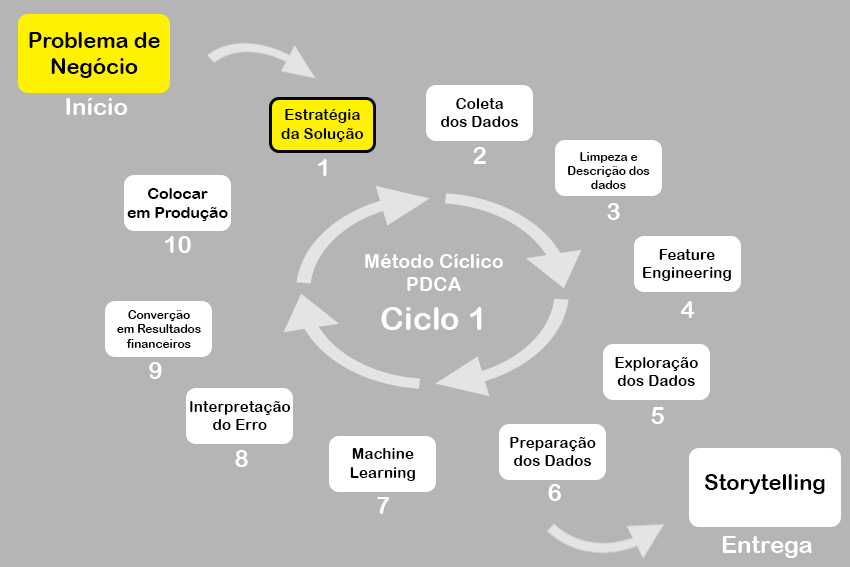
<style>
.page{position:relative;width:850px;height:567px;background:#b5b5b5}
.page>*{position:absolute;margin:0}
.t1{font:21.6px "ArialRoundedMTBold";color:#000000}
.t2{font:24px "ArialRoundedMTBold";color:#ffffff}
.t3{font:15.3px "ArialRoundedMTBold";color:#000000}
.t4{font:11.8px "ArialRoundedMTBold";color:#000000}
.t5{font:15.7px "ArialRoundedMTBold";color:#000000}
.t6{font:19.5px "ArialRoundedMTBold";color:#ffffff}
.t7{font:32.4px "ArialRoundedMTBold";color:#ffffff}
</style>
<div class="page">
<p class="t1" style="left:29px;top:32px;width:131px;height:46px;text-align:center">Problema de <br>Negócio</p>
<p class="t2" style="left:66px;top:98px;width:62px;height:17px">Início</p>
<p class="t3" style="left:441px;top:98px;width:78px;height:29px;text-align:center">Coleta<br>dos Dados</p>
<p class="t3" style="left:281px;top:109px;width:83px;height:33px;text-align:center">Estratégia<br>da Solução</p>
<p class="t2" style="left:473px;top:147px;width:13px;height:17px">2</p>
<p class="t2" style="left:318px;top:159px;width:9px;height:17px">1</p>
<p class="t4" style="left:568px;top:152px;width:82px;height:37px;text-align:center">Limpeza e<br>Descrição dos <br>dados</p>
<p class="t5" style="left:127px;top:188px;width:101px;height:33px;text-align:center">Colocar<br>em Produção</p>
<p class="t2" style="left:607px;top:203px;width:13px;height:17px">3</p>
<p class="t2" style="left:165px;top:236px;width:26px;height:17px">10</p>
<p class="t6" style="left:365px;top:254px;width:138px;height:76px;text-align:center">Método Cíclico PDCA<br><span class="t7">Ciclo 1</span></p>
<p class="t3" style="left:643px;top:249px;width:88px;height:32px;text-align:center">Feature<br>Engineering</p>
<p class="t2" style="left:680px;top:301px;width:15px;height:17px">4</p>
<p class="t4" style="left:117px;top:310px;width:84px;height:38px;text-align:center">Converção<br>em Resultados<br>financeiros</p>
<p class="t2" style="left:149px;top:362px;width:13px;height:17px">9</p>
<p class="t3" style="left:615px;top:357px;width:83px;height:29px;text-align:center">Exploração<br>dos Dados</p>
<p class="t3" style="left:190px;top:401px;width:101px;height:29px;text-align:center">Interpretação<br>do Erro</p>
<p class="t2" style="left:651px;top:407px;width:13px;height:17px">5</p>
<p class="t3" style="left:510px;top:437px;width:86px;height:29px;text-align:center">Preparação<br>dos Dados</p>
<p class="t3" style="left:350px;top:448px;width:65px;height:33px;text-align:center">Machine<br>Learning</p>
<p class="t2" style="left:235px;top:450px;width:13px;height:17px">8</p>
<p class="t2" style="left:548px;top:484px;width:13px;height:17px">6</p>
<p class="t1" style="left:705px;top:474px;width:120px;height:20px">Storytelling</p>
<p class="t2" style="left:377px;top:497px;width:13px;height:17px">7</p>
<p class="t2" style="left:722px;top:536px;width:90px;height:22px">Entrega</p>
</div>
